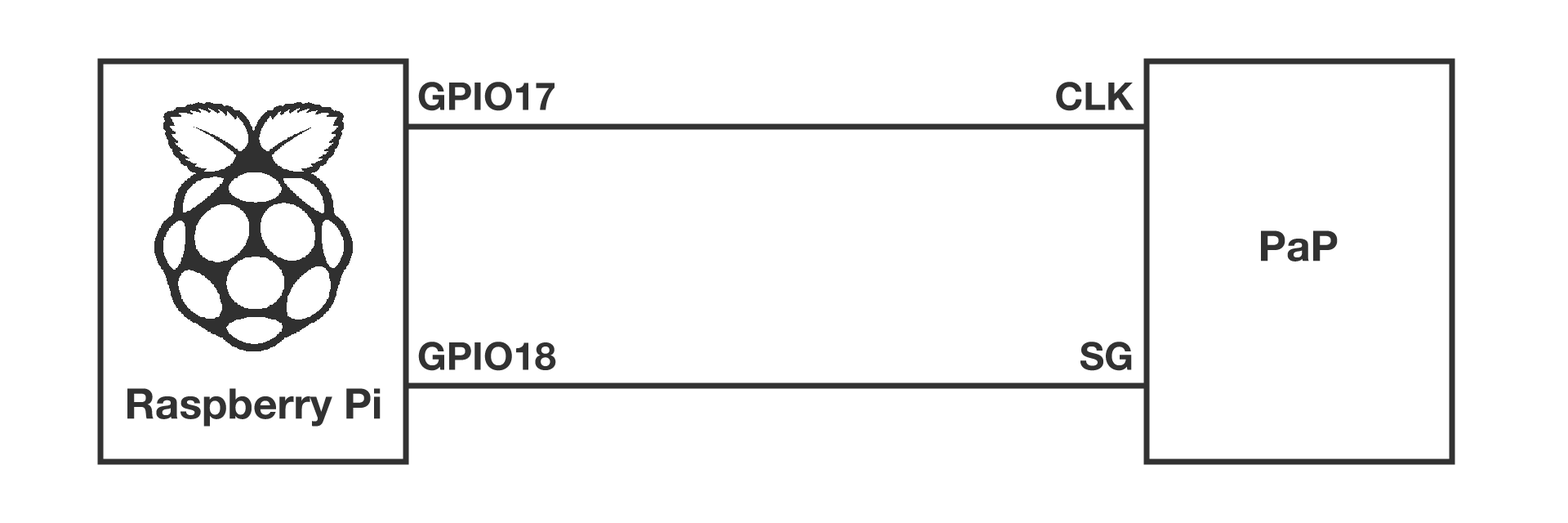
<style>
.page{position:relative;width:1568px;height:523px;background:#ffffff}
.page>*{position:absolute;margin:0}
.t1{font:38.4px/125px "HelveticaNeue-Bold";color:#323232}
.t2{font:38.4px/251.5px "HelveticaNeue-Bold";color:#323232}
.t3{font:42.1px "HelveticaNeue-Bold";color:#323232}
</style>
<div class="page">
<p class="t1" style="left:418px;top:82px;width:138px;height:289px">GPIO17<br><span class="t2">GPIO18</span></p>
<p class="t1" style="left:1056px;top:82px;width:78px;height:289px;text-align:right">CLK<br><span class="t2">SG</span></p>
<p class="t3" style="left:1261px;top:230px;width:77px;height:31px">PaP</p>
<p class="t3" style="left:127px;top:388px;width:254px;height:38px">Raspberry Pi</p>
</div>
